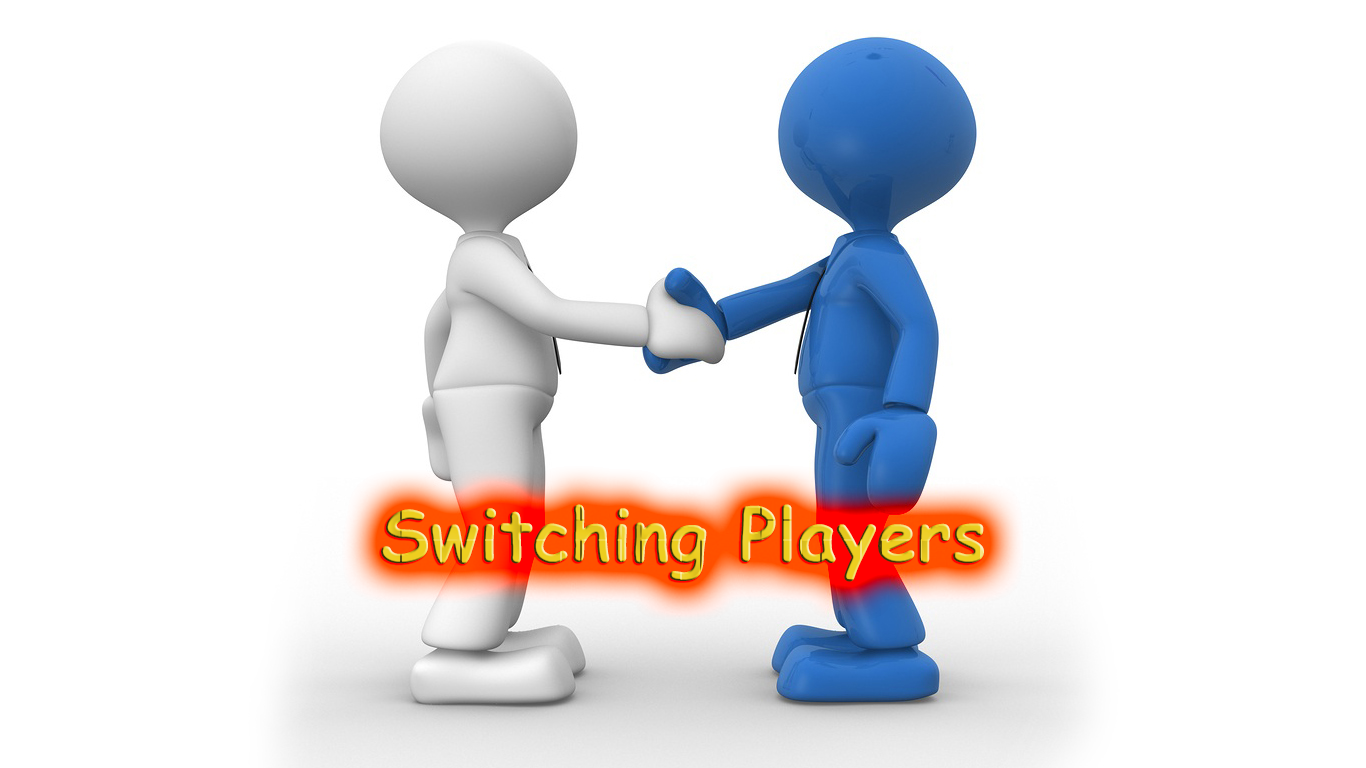
<style>
.page{position:relative;width:1366px;height:768px;background:#ffffff}
.page>*{position:absolute;margin:0}
.t1{font:72px "ComicSansMS-Bold"}
</style>
<div class="page">
<p class="t1" style="left:381px;top:504px;width:603px;height:78px">Switching Players</p>
</div>
